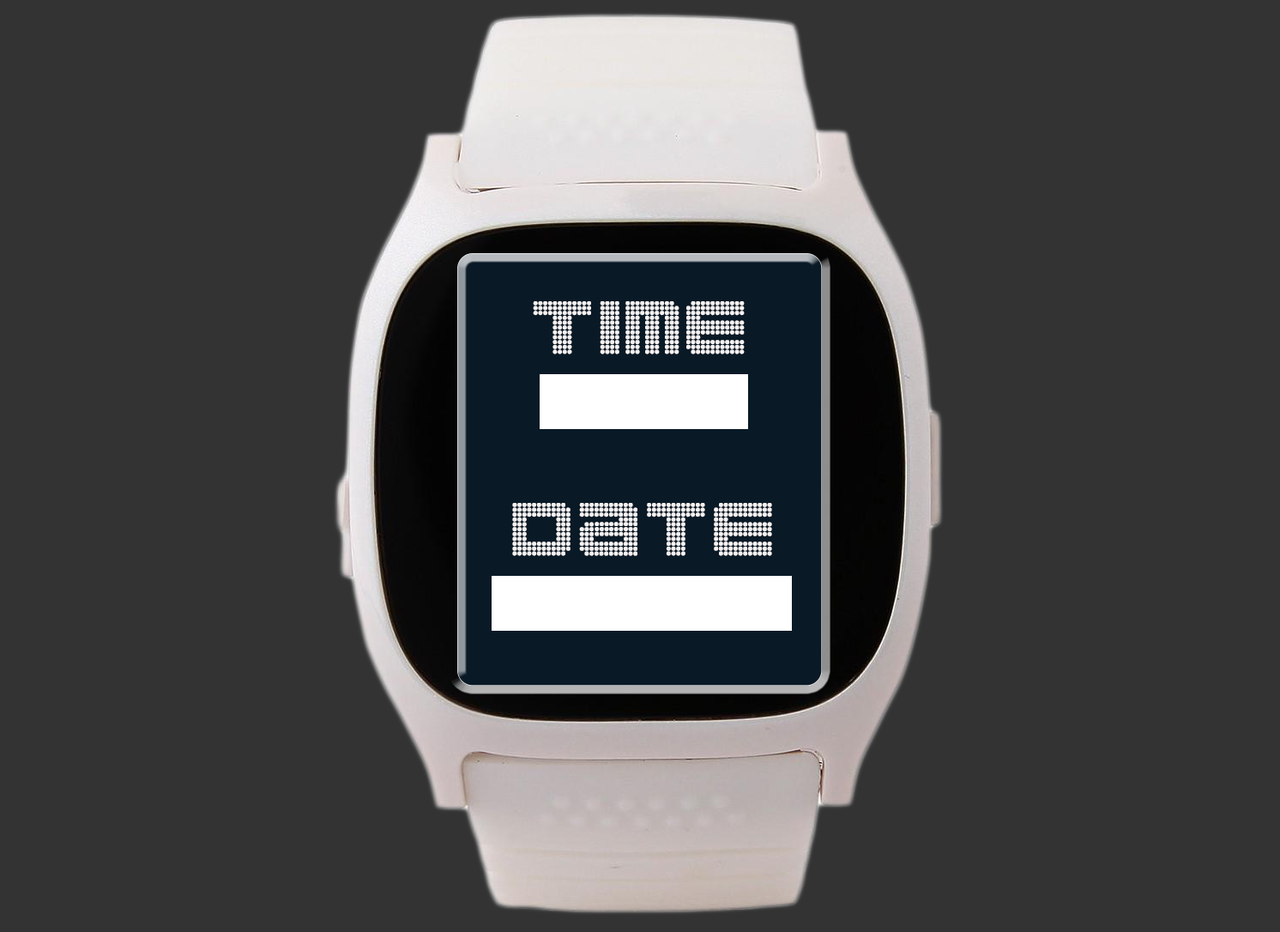
<style>
.page{position:relative;width:1280px;height:932px;background:#333333}
.page>*{position:absolute;margin:0}
.t1{font:85.8px "Clubland";color:#f6f2f2}
</style>
<div class="page">
<p class="t1" style="left:533px;top:301px;width:212px;height:53px">TIME</p>
<p class="t1" style="left:512px;top:503px;width:260px;height:53px">DATE</p>
</div>
